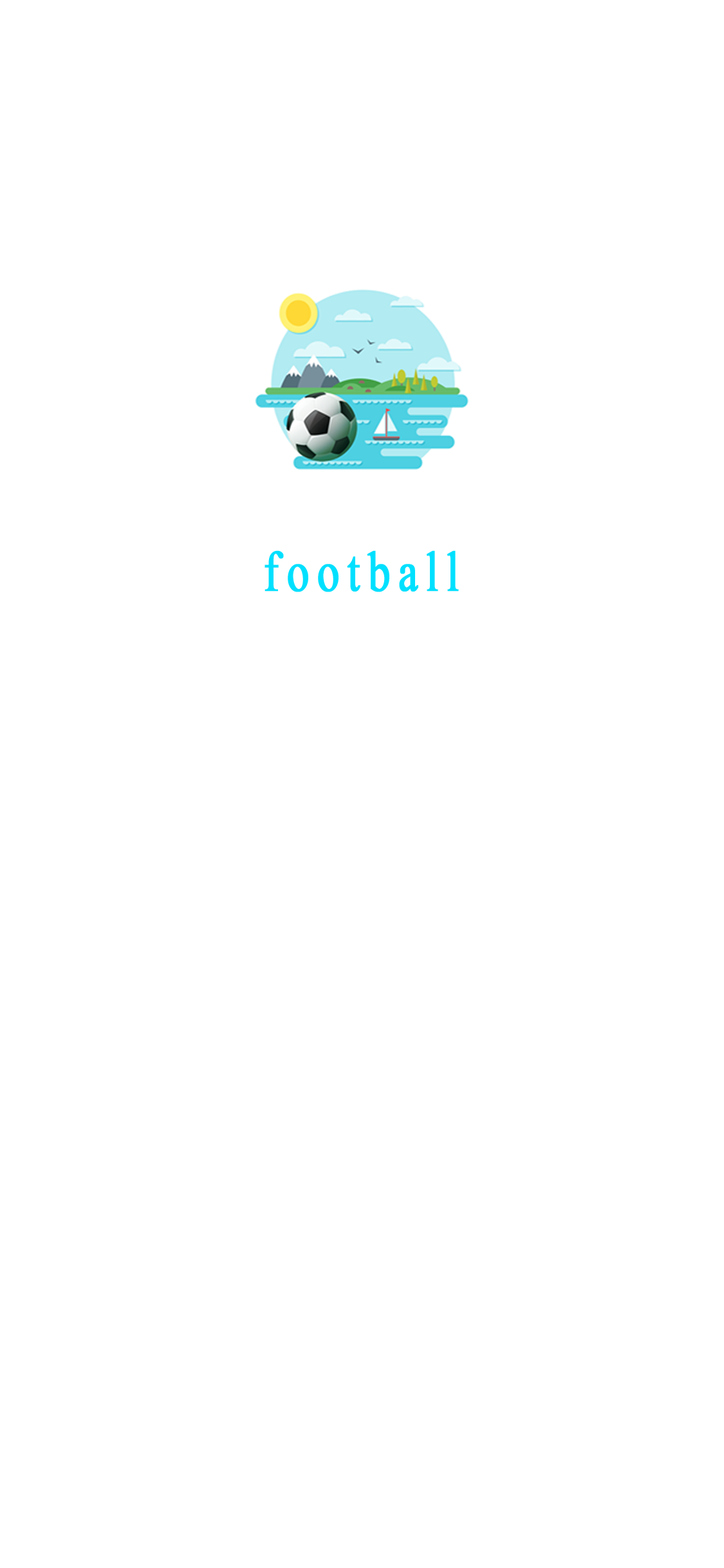
<style>
.page{position:relative;width:724px;height:1568px;background:#ffffff}
.page>*{position:absolute;margin:0}
.t1{font:56.8px "MongolianBaiti";letter-spacing:0.16em;color:#00e0ff;font-weight:bold;scale:0.78 1}
</style>
<div class="page">
<p class="t1" style="left:265px;top:550px;width:194px;height:42px">football</p>
</div>
